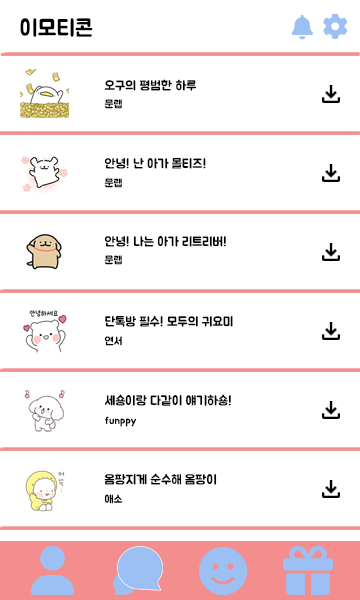
<style>
.page{position:relative;width:360px;height:600px;background:#ffffff}
.page>*{position:absolute;margin:0}
.t1{font:23px "BMJUA";color:#000000}
.t2{font:13px "BMJUA";color:#000000}
.t3{font:11px "BMJUA";color:#000000}
</style>
<div class="page">
<p class="t1" style="left:20px;top:18px;width:73px;height:19px">이모티콘</p>
<p class="t2" style="left:104px;top:79px;width:93px;height:12px">오구의 평범한 하루</p>
<p class="t3" style="left:104px;top:99px;width:18px;height:10px">문랩</p>
<p class="t2" style="left:104px;top:157px;width:102px;height:12px">안녕! 난 아가 몰티즈!</p>
<p class="t3" style="left:104px;top:178px;width:18px;height:10px">문랩</p>
<p class="t2" style="left:104px;top:235px;width:122px;height:12px">안녕! 나는 아가 리트리버!</p>
<p class="t3" style="left:104px;top:255px;width:18px;height:10px">문랩</p>
<p class="t2" style="left:105px;top:315px;width:128px;height:12px">단톡방 필수! 모두의 귀요미</p>
<p class="t3" style="left:104px;top:336px;width:18px;height:10px">연서</p>
<p class="t2" style="left:104px;top:394px;width:127px;height:12px">세숑이랑 다같이 얘기하숑!</p>
<p class="t3" style="left:105px;top:416px;width:32px;height:11px">funppy</p>
<p class="t2" style="left:104px;top:473px;width:113px;height:12px">옴팡지게 순수해 옴팡이</p>
<p class="t3" style="left:104px;top:494px;width:19px;height:10px">애소</p>
</div>
